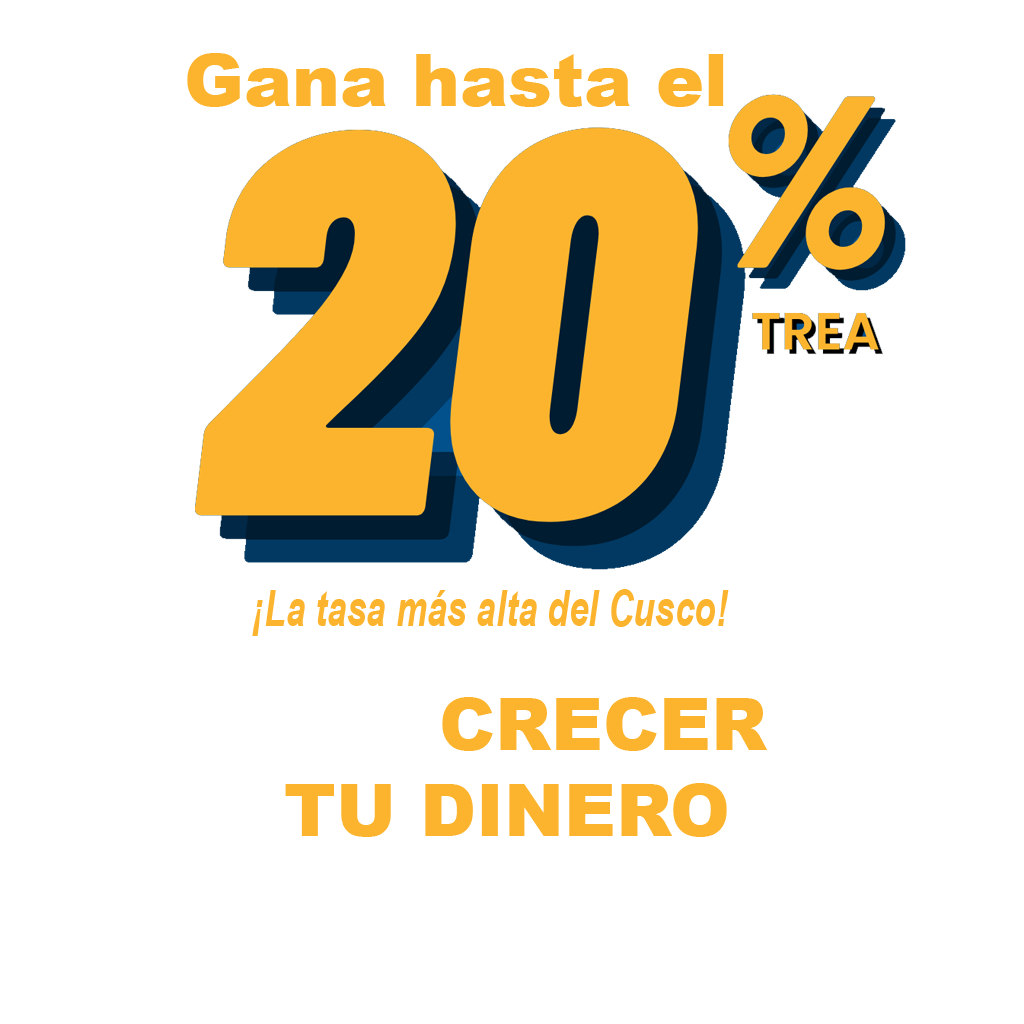
<style>
.page{position:relative;width:1024px;height:1024px;background:#ffffff}
.page>*{position:absolute;margin:0}
.t1{font:72px "Arial-Black";color:#fcb42e}
.t2{font:50.2px "Arial-BoldItalicMT";color:#fcb42e;scale:0.7 1}
.t3{font:72px "Arial-Black";color:#ffffff}
</style>
<div class="page">
<p class="t1" style="left:187px;top:53px;width:537px;height:54px">Gana hasta el</p>
<p class="t2" style="left:252px;top:589px;width:477px;height:47px">¡La tasa más alta del Cusco!</p>
<p class="t1" style="left:252px;top:697px;width:515px;height:140px;text-align:center"><span class="t3">HAZ</span> CRECER<br>TU DINERO</p>
</div>
